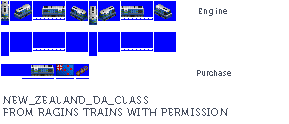
<style>
.page{position:relative;width:289px;height:124px;background:#ffffff}
.page>*{position:absolute;margin:0}
.t1{font:8px "Museo700-Regular";letter-spacing:0.075em;color:#444c5c}
.t2{font:8px "Museo700-Regular";color:#444c5c}
.t3{font:10px "Museo700-Regular";letter-spacing:0.075em;color:#444c5c;text-transform:uppercase}
</style>
<div class="page">
<p class="t1" style="left:199px;top:8px;width:28px;height:8px">Engine</p>
<p class="t2" style="left:197px;top:70px;width:34px;height:6px">Purchase</p>
<p class="t3" style="left:3px;top:96px;width:225px;height:20px">New_Zealand_DA_Class<br>from ragins trains with permission</p>
</div>
